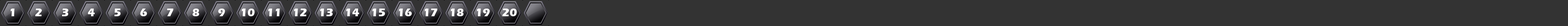
<style>
.page{position:relative;width:1568px;height:26px;background:#333333}
.page>*{position:absolute;margin:0}
.t1{font:11.4px "ErasITC-Bold";color:#ffffff}
</style>
<div class="page">
<p class="t1" style="left:11px;top:9px;width:4px;height:7px">1</p>
<p class="t1" style="left:35px;top:9px;width:7px;height:7px">2</p>
<p class="t1" style="left:62px;top:9px;width:7px;height:7px">3</p>
<p class="t1" style="left:88px;top:9px;width:7px;height:7px">4</p>
<p class="t1" style="left:114px;top:9px;width:7px;height:7px">5</p>
<p class="t1" style="left:140px;top:9px;width:7px;height:7px">6</p>
<p class="t1" style="left:167px;top:9px;width:7px;height:7px">7</p>
<p class="t1" style="left:192px;top:9px;width:7px;height:7px">8</p>
<p class="t1" style="left:218px;top:9px;width:7px;height:7px">9</p>
<p class="t1" style="left:242px;top:9px;width:13px;height:7px">10</p>
<p class="t1" style="left:268px;top:9px;width:12px;height:7px">11</p>
<p class="t1" style="left:294px;top:9px;width:13px;height:7px">12</p>
<p class="t1" style="left:320px;top:9px;width:13px;height:7px">13</p>
<p class="t1" style="left:346px;top:9px;width:13px;height:7px">14</p>
<p class="t1" style="left:372px;top:9px;width:13px;height:7px">15</p>
<p class="t1" style="left:399px;top:9px;width:13px;height:7px">16</p>
<p class="t1" style="left:425px;top:9px;width:12px;height:7px">17</p>
<p class="t1" style="left:451px;top:9px;width:12px;height:7px">18</p>
<p class="t1" style="left:477px;top:9px;width:13px;height:7px">19</p>
<p class="t1" style="left:502px;top:9px;width:15px;height:7px">20</p>
</div>
